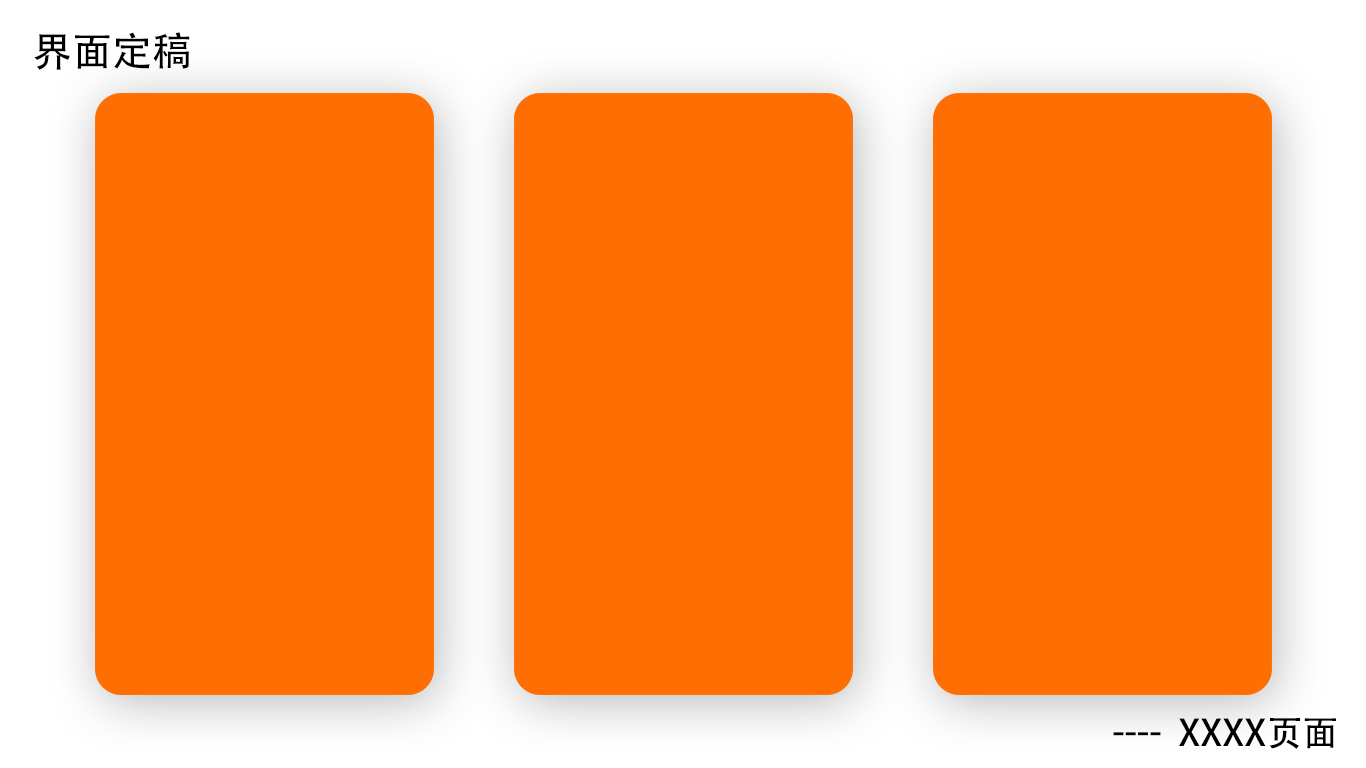
<style>
.page{position:relative;width:1366px;height:768px;background:#ff6e02}
.page>*{position:absolute;margin:0}
.t1{font:40px "AdobeHeitiStd-Regular";color:#000000}
.t2{font:36px "AdobeHeitiStd-Regular";color:#000000}
</style>
<div class="page">
<p class="t1" style="left:34px;top:32px;width:156px;height:38px">界面定稿</p>
<p class="t2" style="left:1179px;top:718px;width:157px;height:31px">XXXX页面</p>
<p class="t2" style="left:1113px;top:732px;width:48px;height:4px">----</p>
</div>
